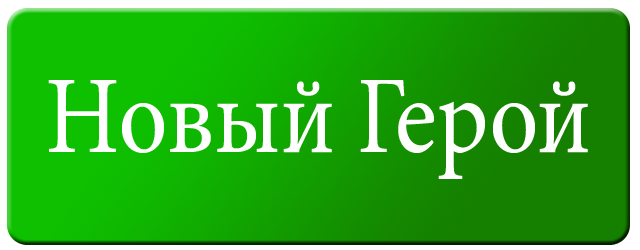
<style>
.page{position:relative;width:640px;height:250px}
.page>*{position:absolute;margin:0}
.t1{font:110.6px "MinionPro-Regular";color:#ffffff;scale:0.88 1}
</style>
<div class="page">
<p class="t1" style="left:48px;top:80px;width:540px;height:99px">Новый Герой</p>
</div>
